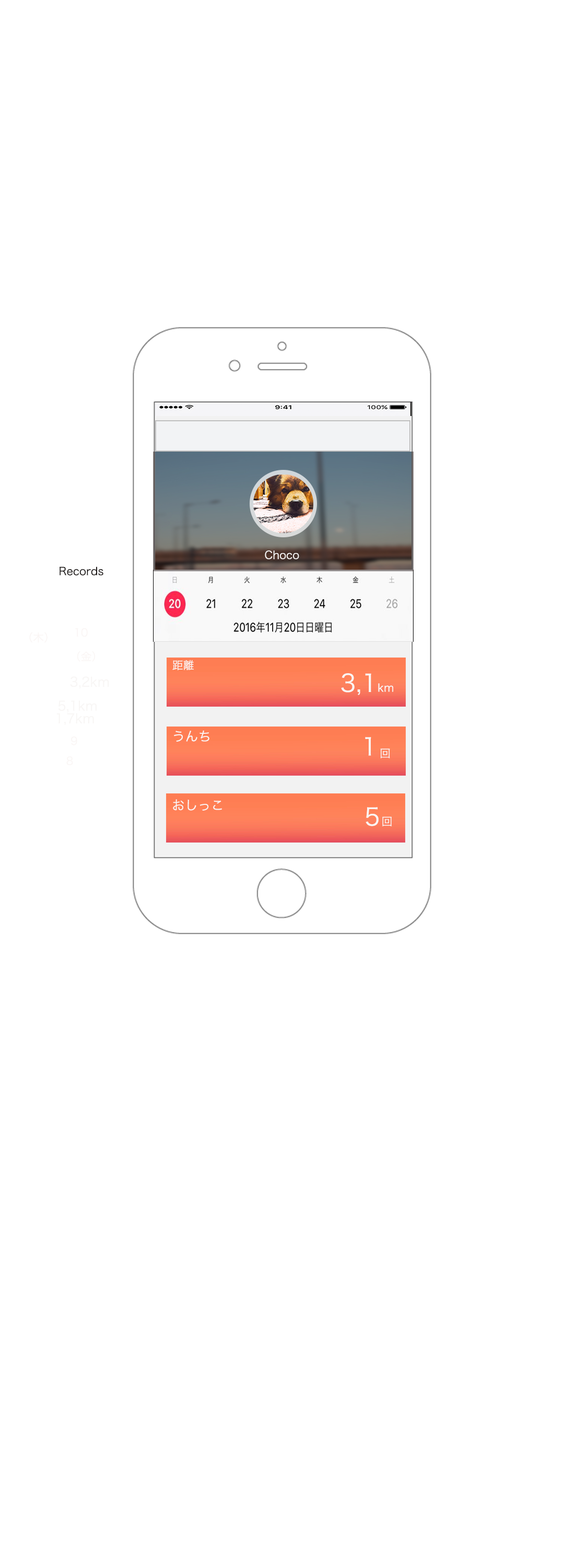
<style>
.page{position:relative;width:564px;height:1568px;background:#ffffff}
.page>*{position:absolute;margin:0}
.t1{font:10.9px "HiraKakuProN-W3";color:#f8f6f5}
.t2{font:10.9px "HiraKakuProN-W3";color:#1d1918}
.t3{font:10.9px "HiraKakuProN-W3";color:#faf6f5}
.t4{font:13.1px "HiraKakuProN-W3";color:#f8f6f5}
.t5{font:24px "HiraKakuProN-W3";color:#faf6f5}
.t6{font:13.1px "HiraKakuProN-W3";color:#faf6f5}
</style>
<div class="page">
<p class="t1" style="left:265px;top:550px;width:34px;height:9px">Choco</p>
<p class="t2" style="left:60px;top:567px;width:43px;height:8px">Records</p>
<p class="t3" style="left:75px;top:628px;width:13px;height:9px">10</p>
<p class="t3" style="left:29px;top:632px;width:19px;height:11px">（木）</p>
<p class="t3" style="left:77px;top:651px;width:18px;height:11px">（金）</p>
<p class="t3" style="left:172px;top:660px;width:22px;height:11px">距離</p>
<p class="t4" style="left:70px;top:676px;width:39px;height:13px">3,2km</p>
<p class="t5" style="left:341px;top:673px;width:31px;height:22px">3,1</p>
<p class="t3" style="left:378px;top:683px;width:16px;height:9px">km</p>
<p class="t4" style="left:58px;top:700px;width:39px;height:12px">5,1km</p>
<p class="t4" style="left:57px;top:713px;width:37px;height:12px">1,7km</p>
<p class="t3" style="left:71px;top:736px;width:6px;height:9px">９</p>
<p class="t6" style="left:174px;top:730px;width:36px;height:12px">うんち</p>
<p class="t5" style="left:365px;top:737px;width:7px;height:19px">1</p>
<p class="t3" style="left:381px;top:748px;width:9px;height:10px">回</p>
<p class="t3" style="left:66px;top:756px;width:7px;height:9px">８</p>
<p class="t6" style="left:173px;top:799px;width:49px;height:12px">おしっこ</p>
<p class="t5" style="left:366px;top:807px;width:13px;height:19px">5</p>
<p class="t3" style="left:383px;top:816px;width:9px;height:10px">回</p>
</div>
